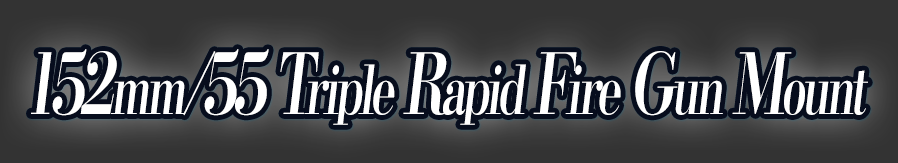
<style>
.page{position:relative;width:898px;height:163px;background:#333333}
.page>*{position:absolute;margin:0}
.t1{font:84px "KochoStd-Heavy";letter-spacing:-0.08em;color:#ffffff;font-style:italic;scale:0.68 1}
.t2{font:67.2px "KochoStd-Heavy";letter-spacing:-0.08em;color:#ffffff;font-style:italic;scale:0.68 1}
</style>
<div class="page">
<p class="t1" style="left:31px;top:49px;width:837px;height:76px">152<span class="t2">mm</span>/55 T<span class="t2">riple </span>R<span class="t2">apid </span>F<span class="t2">ire </span>G<span class="t2">un </span>M<span class="t2">ount</span></p>
</div>
